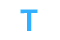
<style>
.page{position:relative;width:60px;height:40px;background:#ffffff}
.page>*{position:absolute;margin:0}
.t1{font:30px "Arial-BoldMT";letter-spacing:-0.025em;color:#32affe}
</style>
<div class="page">
<p class="t1" style="left:20px;top:9px;width:18px;height:22px">T</p>
</div>
